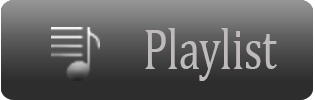
<style>
.page{position:relative;width:315px;height:100px}
.page>*{position:absolute;margin:0}
.t1{font:58.3px "Cambria";color:#bfbbbb;scale:0.73 1}
</style>
<div class="page">
<p class="t1" style="left:145px;top:28px;width:132px;height:53px">Playlist</p>
</div>
